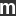
<style>
.page{position:relative;width:16px;height:16px;background:#333333}
.page>*{position:absolute;margin:0}
.t1{font:21px "CoolveticaRg-Regular";color:#ffffff}
</style>
<div class="page">
<p class="t1" style="left:0px;top:3px;width:15px;height:11px">m</p>
</div>
